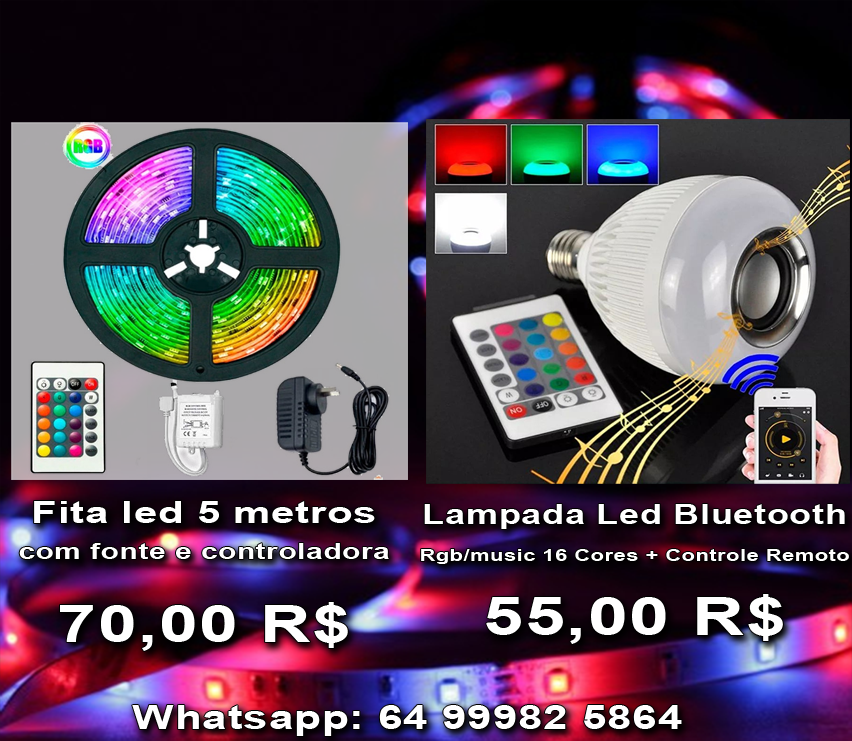
<style>
.page{position:relative;width:852px;height:741px}
.page>*{position:absolute;margin:0}
.t1{font:22.1px "Arial-BoldMT";letter-spacing:0.02em;color:#ffffff;scale:1.35 1}
.t2{font:30.9px "Arial-BoldMT";letter-spacing:0.02em;color:#ffffff;scale:1.35 1}
.t3{font:51.7px "Arial-BoldMT";letter-spacing:0.02em;color:#ffffff;scale:1.35 1}
.t4{font:16.3px/37px "Arial-BoldMT";letter-spacing:0.02em;color:#ffffff;scale:1.35 1}
.t5{font:26.6px/37px "Arial-BoldMT";letter-spacing:0.02em;color:#ffffff;scale:1.35 1}
.t6{font:53.3px/37px "Arial-BoldMT";letter-spacing:0.02em;color:#ffffff;scale:1.35 1}
.t7{font:32.6px "Arial-BoldMT";letter-spacing:0.02em;color:#ffffff;scale:1.35 1}
</style>
<div class="page">
<p class="t1" style="left:19px;top:501px;width:370px;height:150px;text-align:center"><span class="t2">Fita led 5 metros<br></span>com fonte e controladora<br><span class="t3">70,00 R$</span></p>
<p class="t4" style="left:421px;top:504px;width:428px;height:140px;text-align:center"><span class="t5">Lampada Led Bluetooth<br></span>Rgb/music 16 Cores + Controle Remoto<br><br><span class="t6">55,00 R$</span></p>
<p class="t7" style="left:132px;top:705px;width:550px;height:31px">Whatsapp: 64 99982 5864</p>
</div>
